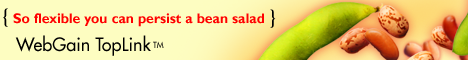
<style>
.page{position:relative;width:468px;height:60px;background:#fdfdc1}
.page>*{position:absolute;margin:0}
.t1{font:22px "Berkeley-Bold";color:#000000}
.t2{font:14px "GillSans-Bold";color:#ff0000}
.t3{font:18px "Futura";color:#000000}
.t4{font:8px "Futura"}
</style>
<div class="page">
<p class="t1" style="left:3px;top:8px;width:5px;height:19px">{</p>
<p class="t2" style="left:13px;top:13px;width:251px;height:14px">So flexible you can persist a bean salad</p>
<p class="t1" style="left:270px;top:9px;width:6px;height:19px">}</p>
<p class="t3" style="left:15px;top:35px;width:136px;height:21px">WebGain TopLink</p>
<p class="t4" style="left:153px;top:41px;width:11px;height:7px">TM</p>
</div>
